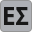
<style>
.page{position:relative;width:32px;height:32px;background:#aeb0b5}
.page>*{position:absolute;margin:0}
.t1{font:26.2px "MyriadPro-Bold";letter-spacing:0.02em;color:#181818;scale:0.92 1}
</style>
<div class="page">
<p class="t1" style="left:4px;top:7px;width:25px;height:18px">EΣ</p>
</div>
